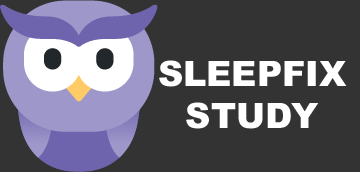
<style>
.page{position:relative;width:360px;height:172px;background:#333333}
.page>*{position:absolute;margin:0}
.t1{font:35px "Arial-Black";color:#ffffff;text-transform:uppercase}
</style>
<div class="page">
<p class="t1" style="left:159px;top:60px;width:188px;height:69px;text-align:center">SleepFix<br>Study</p>
</div>
